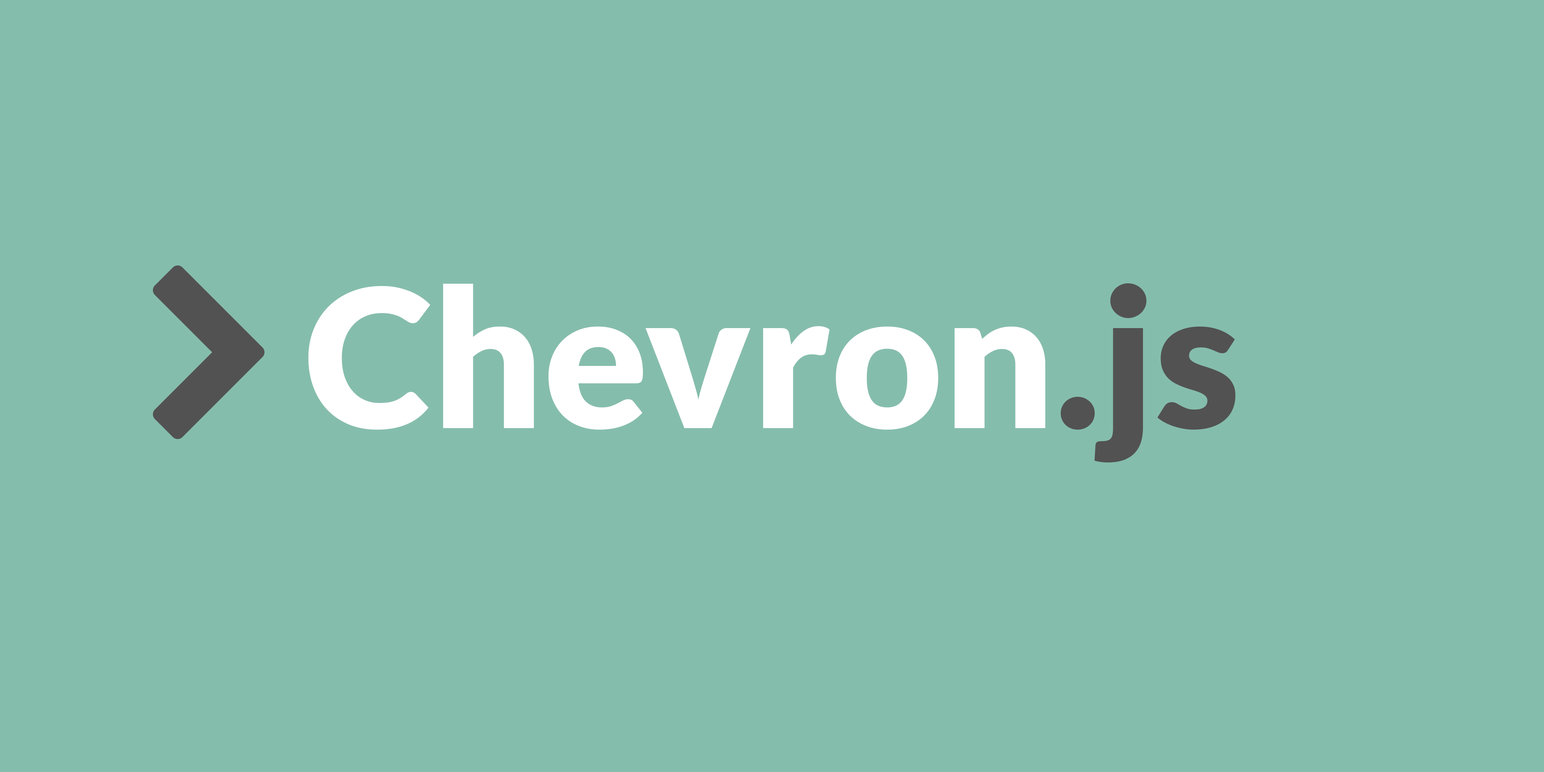
<style>
.page{position:relative;width:1544px;height:772px;background:#85bdac}
.page>*{position:absolute;margin:0}
.t1{font:193px "Lato-Black";color:#ffffff}
.t2{font:193px "Lato-Black";color:#525252}
</style>
<div class="page">
<p class="t1" style="left:308px;top:283px;width:928px;height:180px">Chevron<span class="t2">.js</span></p>
</div>
